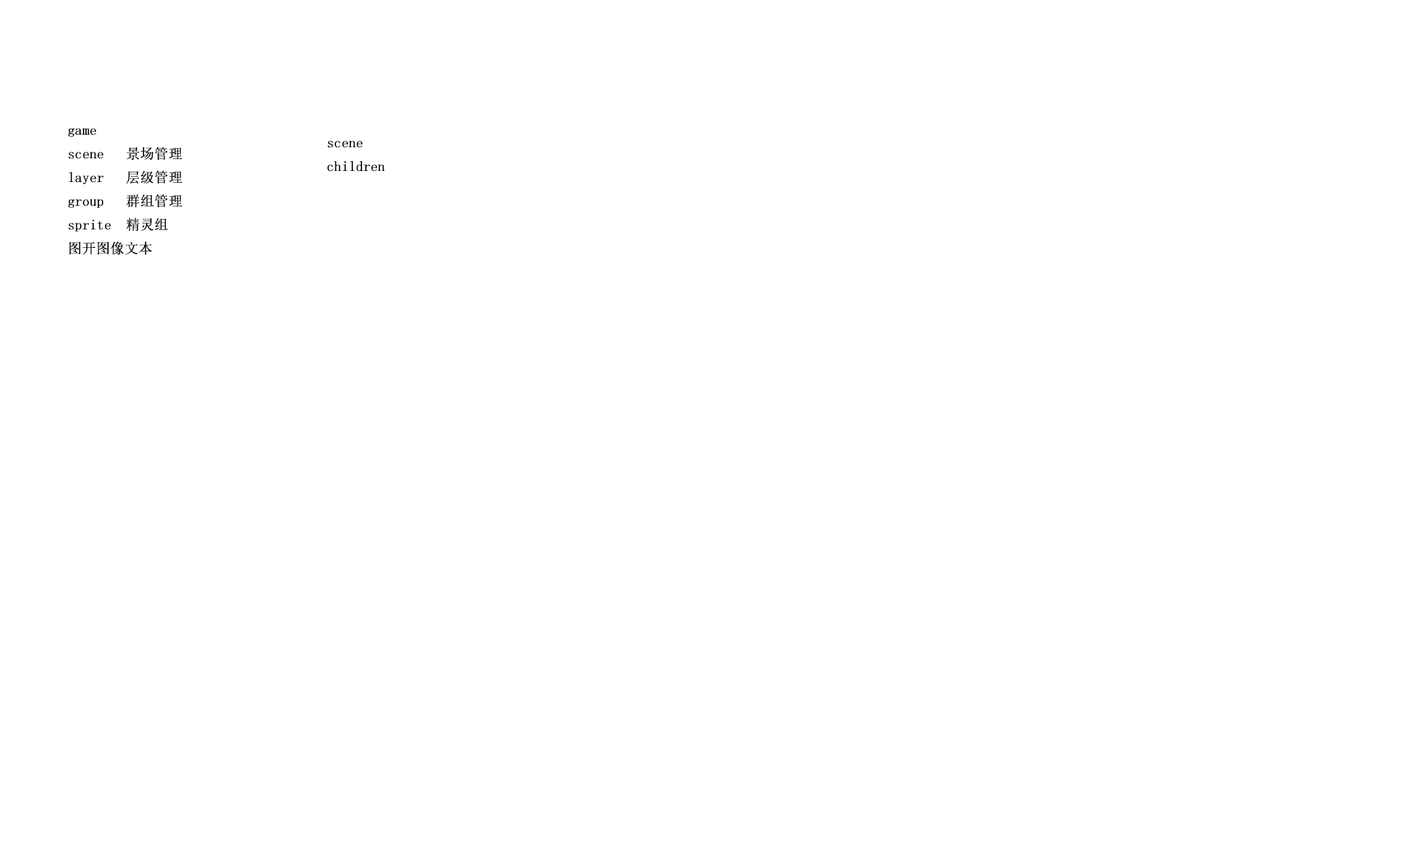
<style>
.page{position:relative;width:1406px;height:848px;background:#ffffff}
.page>*{position:absolute;margin:0}
.t1{font:13.8px/23.7px "SimSun";color:#000000;font-weight:bold}
</style>
<div class="page">
<p class="t1" style="left:68px;top:128px;width:114px;height:127px">game<br>scene   景场管理<br>layer   层级管理<br>group   群组管理<br>sprite  精灵组<br>图开图像文本</p>
<p class="t1" style="left:327px;top:141px;width:58px;height:31px">scene<br>children</p>
</div>
